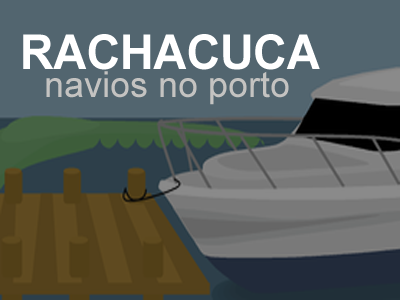
<style>
.page{position:relative;width:400px;height:300px;background:#52656f}
.page>*{position:absolute;margin:0}
.t1{font:48px "Arial-BoldMT";color:#ffffff;scale:0.96 1}
.t2{font:36px "ArialMT";color:#c4c3c1}
</style>
<div class="page">
<p class="t1" style="left:23px;top:34px;width:297px;height:36px">RACHACUCA</p>
<p class="t2" style="left:46px;top:71px;width:243px;height:34px">navios no porto</p>
</div>
